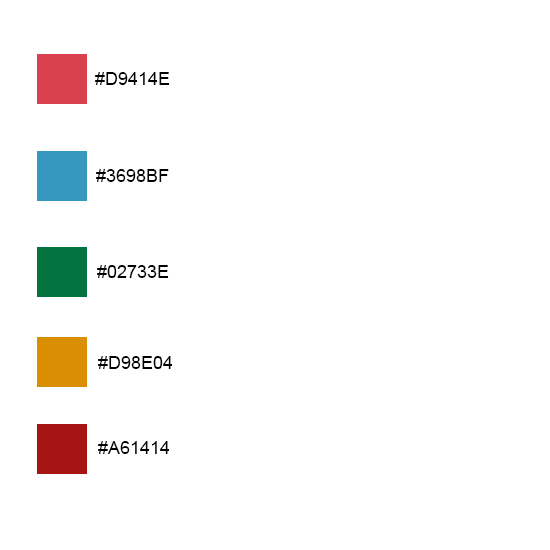
<style>
.page{position:relative;width:550px;height:550px;background:#ffffff}
.page>*{position:absolute;margin:0}
.t1{font:18px "ArialMT";color:#000000}
</style>
<div class="page">
<p class="t1" style="left:95px;top:72px;width:75px;height:13px">#D9414E</p>
<p class="t1" style="left:96px;top:169px;width:73px;height:13px">#3698BF</p>
<p class="t1" style="left:97px;top:265px;width:72px;height:13px">#02733E</p>
<p class="t1" style="left:98px;top:356px;width:75px;height:13px">#D98E04</p>
<p class="t1" style="left:98px;top:441px;width:72px;height:13px">#A61414</p>
</div>
